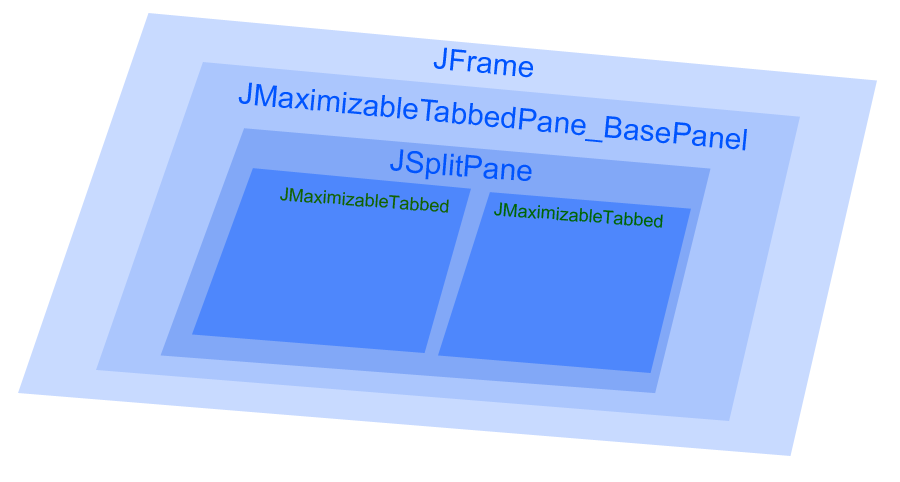
<style>
.page{position:relative;width:900px;height:482px;background:#ffffff}
.page>*{position:absolute;margin:0}
.t1{font:30px "ArialMT";color:#0054fe}
.t2{font:18px "ArialMT";color:#126200}
.t3{font:18px "ArialMT";color:#006505}
</style>
<div class="page">
<p class="t1" style="left:433px;top:47px;width:100px;height:31px;rotate:5deg">JFrame</p>
<p class="t1" style="left:238px;top:82px;width:509px;height:69px;rotate:5deg">JMaximizableTabbedPane_BasePanel</p>
<p class="t1" style="left:390px;top:149px;width:142px;height:32px;rotate:5deg">JSplitPane</p>
<p class="t2" style="left:280px;top:187px;width:169px;height:26px;rotate:4deg">JMaximizableTabbed</p>
<p class="t3" style="left:494px;top:202px;width:169px;height:26px;rotate:4deg">JMaximizableTabbed</p>
</div>
